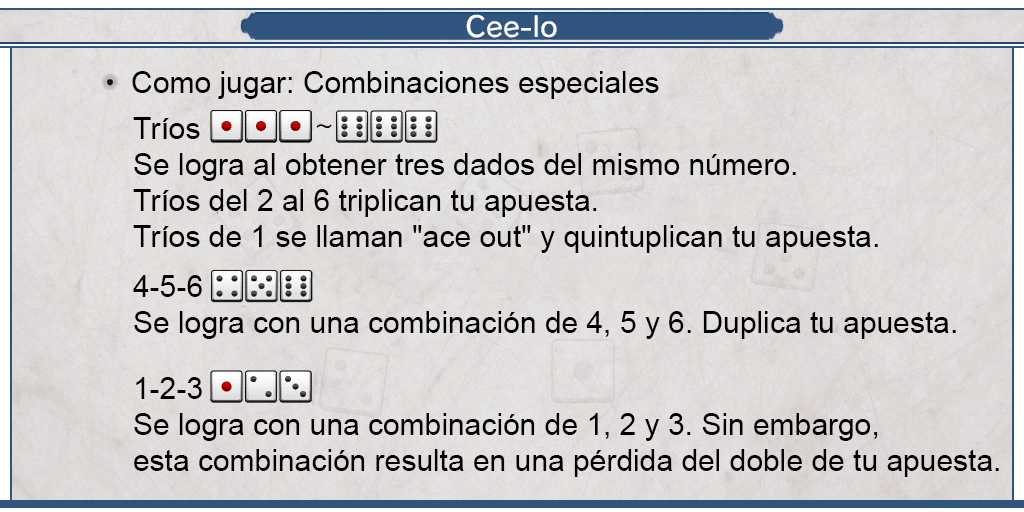
<style>
.page{position:relative;width:1024px;height:512px}
.page>*{position:absolute;margin:0}
.t1{font:29.8px "ArialMT";color:#000000}
.t2{font:30px "ArialMT";color:#000000}
.t3{font:29.9px "ArialMT";color:#000000}
</style>
<div class="page">
<p class="t1" style="left:132px;top:71px;width:527px;height:28px">Como jugar: Combinaciones especiales</p>
<p class="t2" style="left:133px;top:117px;width:745px;height:136px;text-align:justify">Tríos<br>Se logra al obtener tres dados del mismo número.<br>Tríos del 2 al 6 triplican tu apuesta.<br>Tríos de 1 se llaman "ace out" y quintuplican tu apuesta.</p>
<p class="t3" style="left:133px;top:275px;width:823px;height:64px;text-align:justify">4-5-6<br>Se logra con una combinación de 4, 5 y 6. Duplica tu apuesta.</p>
<p class="t1" style="left:134px;top:377px;width:865px;height:100px;text-align:justify">1-2-3<br>Se logra con una combinación de 1, 2 y 3. Sin embargo,<br>esta combinación resulta en una pérdida del doble de tu apuesta.</p>
</div>
